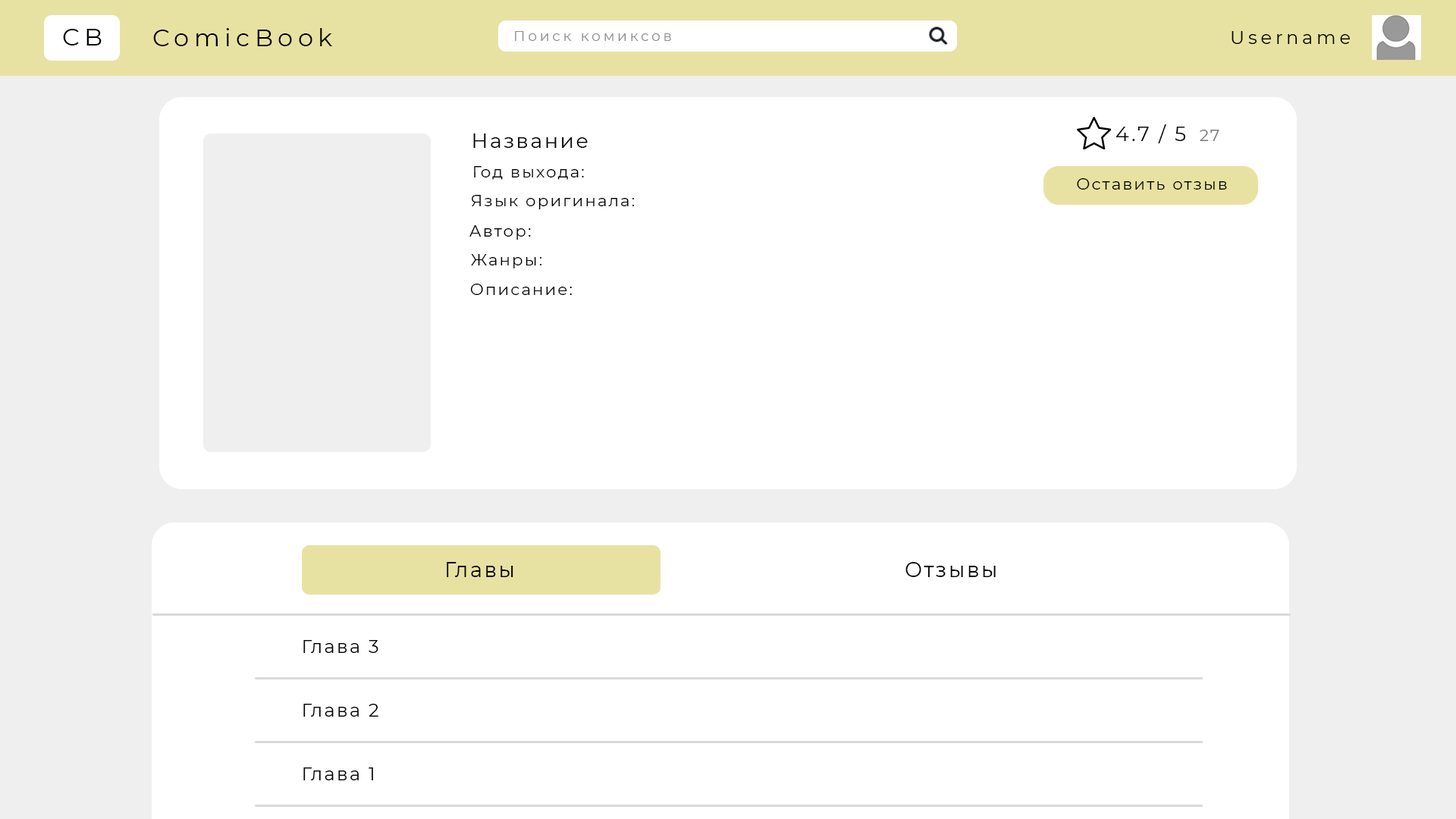
<style>
.page{position:relative;width:1456px;height:819px;background:#ffffff}
.page>*{position:absolute;margin:0}
.t1{font:24.3px "Montserrat-Regular";letter-spacing:0.2em;color:#000000}
.t2{font:14.2px "Montserrat-Regular";letter-spacing:0.2em;color:#8d8d8d}
.t3{font:18.2px "Montserrat-Regular";letter-spacing:0.2em;color:#000000}
.t4{font:20.2px "Montserrat-Regular";letter-spacing:0.1em;color:#000000}
.t5{font:16.2px "Montserrat-Regular";letter-spacing:0.1em;color:#787878}
.t6{font:16.2px "Montserrat-Regular";letter-spacing:0.1em;color:#000000}
.t7{font:20.6px "Montserrat-Regular";letter-spacing:0.1em;color:#000000}
.t8{font:18.2px "Montserrat-Regular";letter-spacing:0.1em;color:#000000}
</style>
<div class="page">
<p class="t1" style="left:63px;top:29px;width:39px;height:16px">CB</p>
<p class="t1" style="left:153px;top:28px;width:179px;height:18px">ComicBook</p>
<p class="t2" style="left:515px;top:31px;width:156px;height:10px">Поиск комиксов</p>
<p class="t3" style="left:1232px;top:31px;width:118px;height:13px">Username</p>
<p class="t4" style="left:1115px;top:124px;width:71px;height:19px">4.7 / 5</p>
<p class="t4" style="left:473px;top:133px;width:115px;height:15px">Название</p>
<p class="t5" style="left:1200px;top:130px;width:19px;height:11px">27</p>
<p class="t6" style="left:474px;top:166px;width:110px;height:14px">Год выхода:</p>
<p class="t6" style="left:1077px;top:178px;width:150px;height:12px">Оставить отзыв</p>
<p class="t6" style="left:472px;top:195px;width:163px;height:14px">Язык оригинала:</p>
<p class="t6" style="left:469px;top:225px;width:62px;height:15px">Автор:</p>
<p class="t6" style="left:471px;top:254px;width:71px;height:14px">Жанры:</p>
<p class="t6" style="left:470px;top:284px;width:102px;height:11px">Описание:</p>
<p class="t7" style="left:447px;top:562px;width:66px;height:15px">Главы</p>
<p class="t7" style="left:905px;top:562px;width:91px;height:15px">Отзывы</p>
<p class="t8" style="left:303px;top:640px;width:75px;height:13px">Глава 3</p>
<p class="t8" style="left:303px;top:704px;width:75px;height:13px">Глава 2</p>
<p class="t8" style="left:303px;top:767px;width:70px;height:13px">Глава 1</p>
</div>
